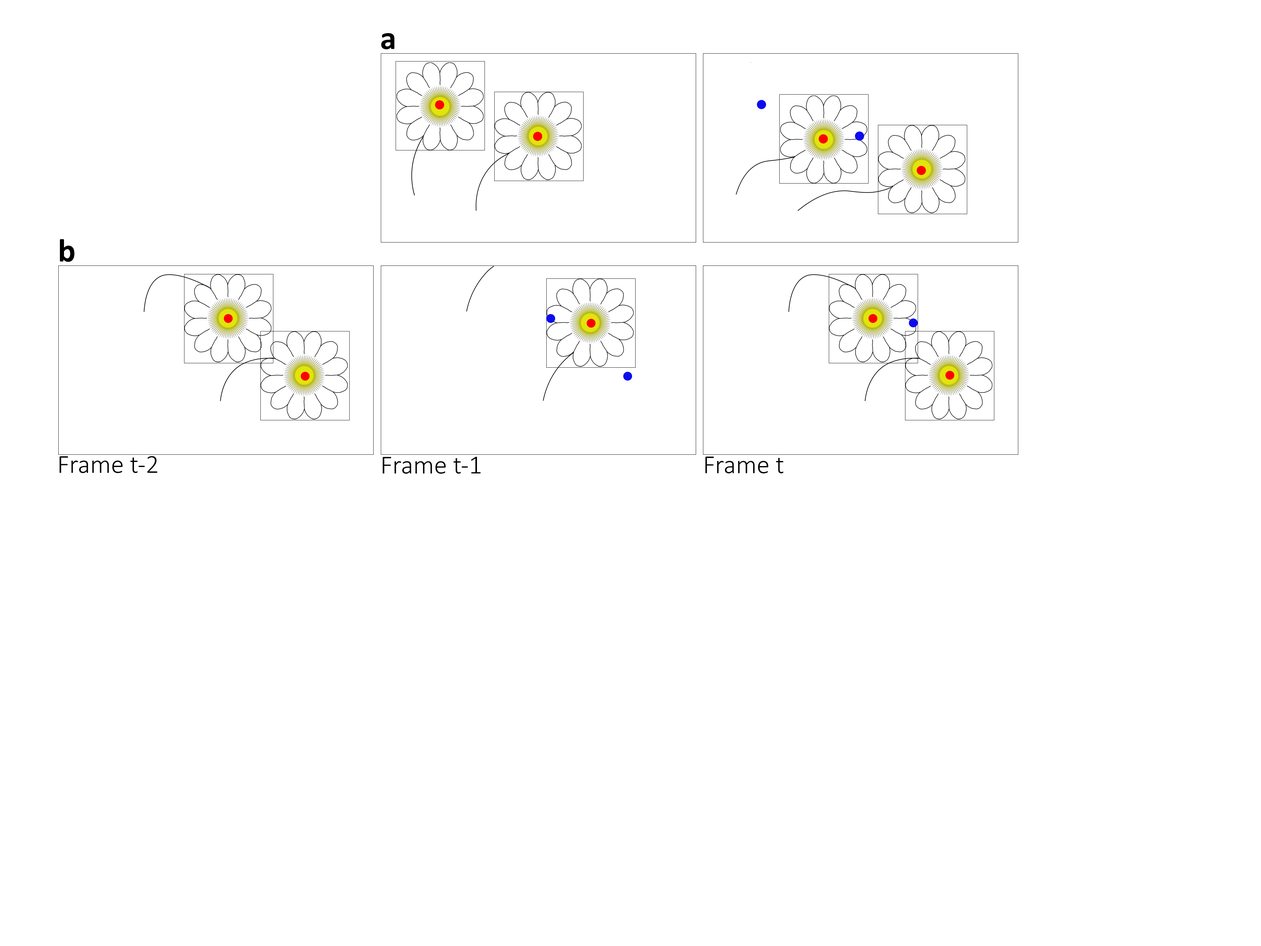
<style>
.page{position:relative;width:1261px;height:946px;background:#ffffff}
.page>*{position:absolute;margin:0}
.t1{font:32.8px "Calibri-Bold";color:#000000}
.t2{font:26.3px "Calibri-Light";color:#000000}
</style>
<div class="page">
<p class="t1" style="left:381px;top:33px;width:13px;height:16px">a</p>
<p class="t1" style="left:60px;top:239px;width:14px;height:23px">b</p>
<p class="t2" style="left:60px;top:456px;width:97px;height:17px">Frame t-2</p>
<p class="t2" style="left:383px;top:456px;width:98px;height:18px">Frame t-1</p>
<p class="t2" style="left:705px;top:456px;width:78px;height:17px">Frame t</p>
</div>
